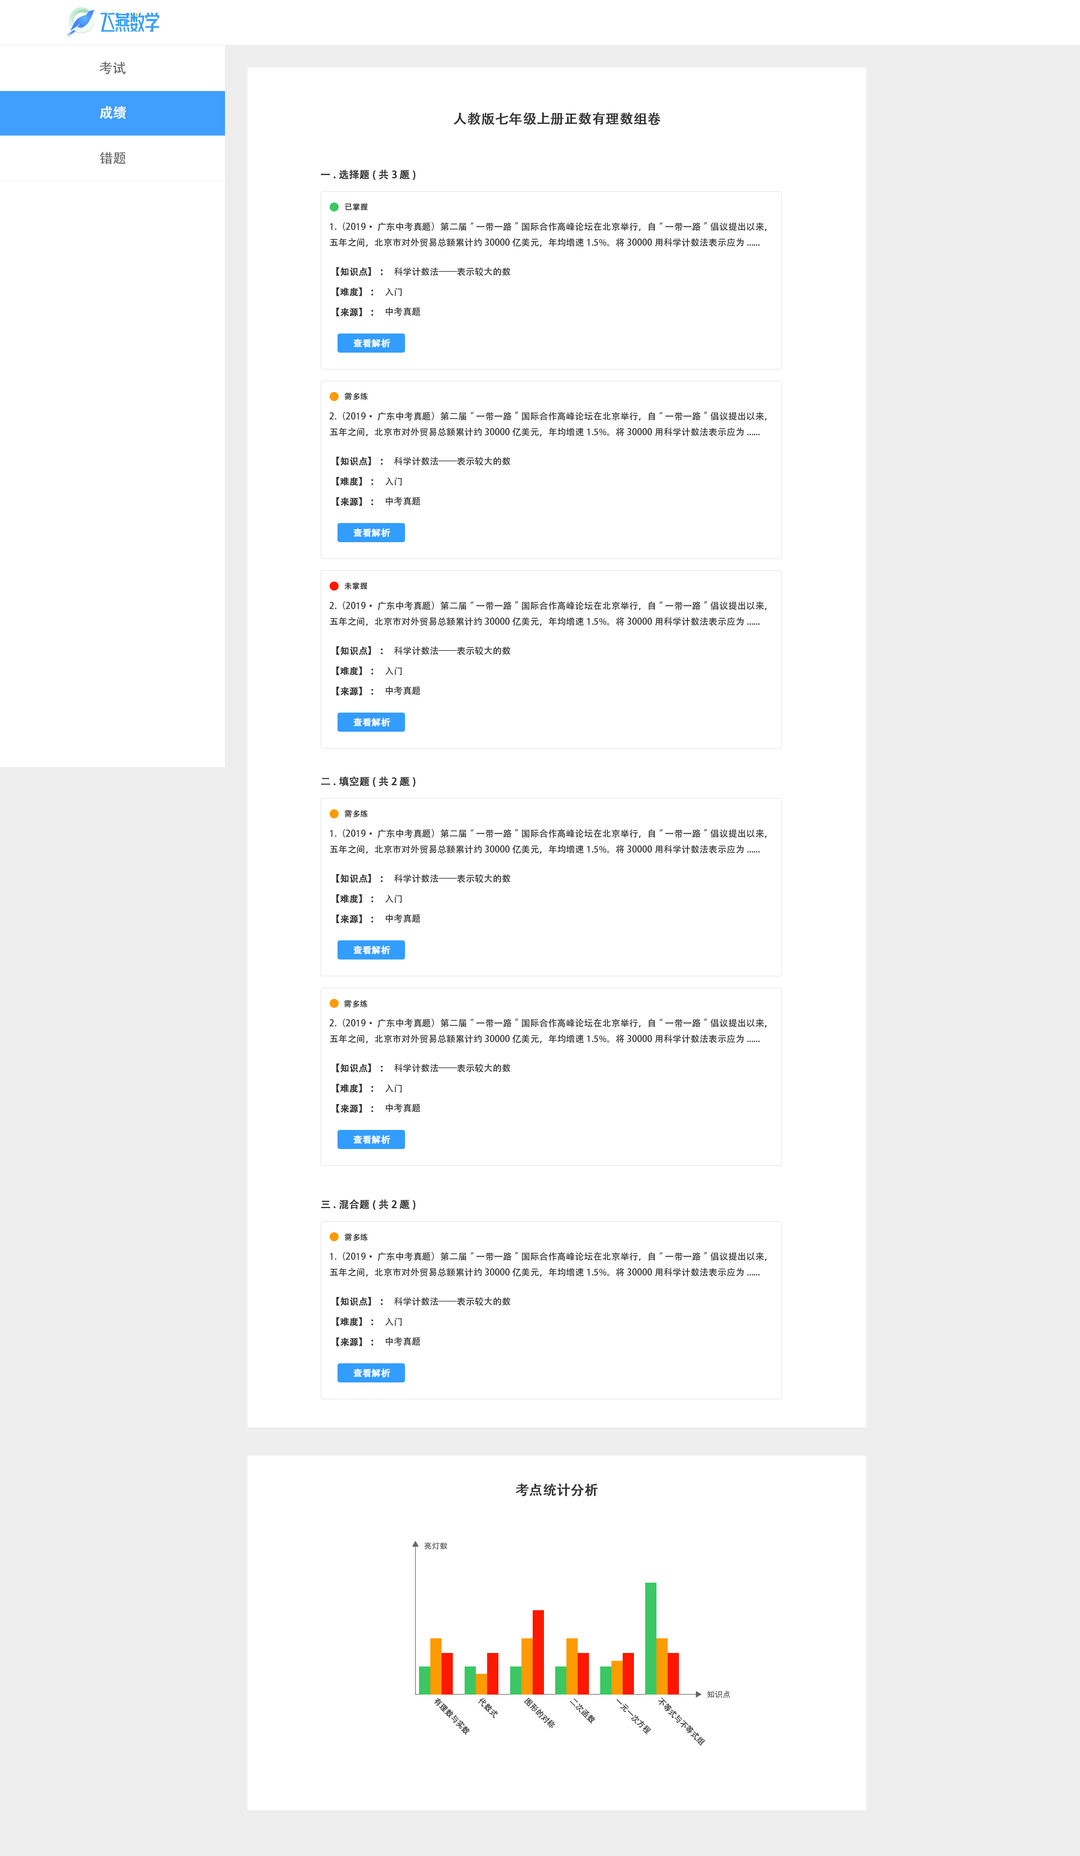
<style>
.page{position:relative;width:1080px;height:1856px;background:#ffffff}
.page>*{position:absolute;margin:0}
.t1{font:13.5px "AdobeHeitiStd-Regular";color:#666666}
.t2{font:13.5px "AdobeHeitiStd-Regular";color:#ffffff;font-weight:bold}
.t3{font:13.5px "AdobeHeitiStd-Regular";color:#333333;font-weight:bold}
.t4{font:10.1px "AdobeHeitiStd-Regular";color:#333333;font-weight:bold}
.t5{font:7.9px "AdobeHeitiStd-Regular";color:#333333}
.t6{font:9px "AdobeHeitiStd-Regular";color:#333333}
.t7{font:9px "AdobeHeitiStd-Regular";color:#333333;font-weight:bold}
.t8{font:9px "AdobeHeitiStd-Regular";color:#ffffff;font-weight:bold}
.t9{font:7.9px "AdobeHeitiStd-Regular";color:#666666}
</style>
<div class="page">
<p class="t1" style="left:99px;top:61px;width:27px;height:13px">考试</p>
<p class="t2" style="left:100px;top:106px;width:26px;height:13px">成绩</p>
<p class="t3" style="left:453px;top:112px;width:207px;height:13px">人教版七年级上册正数有理数组卷</p>
<p class="t1" style="left:100px;top:152px;width:26px;height:12px">错题</p>
<p class="t4" style="left:321px;top:169px;width:95px;height:12px">一.选择题(共3题)</p>
<p class="t5" style="left:345px;top:203px;width:23px;height:8px">已掌握</p>
<p class="t6" style="left:330px;top:222px;width:437px;height:25px">1.（2019·广东中考真题）第二届“一带一路”国际合作高峰论坛在北京举行，自“一带一路”倡议提出以来，五年之间，北京市对外贸易总额累计约30000亿美元，年均增速1.5%。将30000用科学计数法表示应为......</p>
<p class="t7" style="left:336px;top:267px;width:47px;height:9px">【知识点】：</p>
<p class="t6" style="left:394px;top:267px;width:117px;height:9px">科学计数法——表示较大的数</p>
<p class="t7" style="left:336px;top:287px;width:38px;height:9px">【难度】：</p>
<p class="t6" style="left:385px;top:288px;width:17px;height:8px">入门</p>
<p class="t7" style="left:336px;top:308px;width:38px;height:9px">【来源】：</p>
<p class="t6" style="left:385px;top:307px;width:35px;height:9px">中考真题</p>
<p class="t8" style="left:353px;top:339px;width:37px;height:9px">查看解析</p>
<p class="t5" style="left:345px;top:393px;width:23px;height:7px">需多练</p>
<p class="t6" style="left:329px;top:412px;width:438px;height:24px">2.（2019·广东中考真题）第二届“一带一路”国际合作高峰论坛在北京举行，自“一带一路”倡议提出以来，五年之间，北京市对外贸易总额累计约30000亿美元，年均增速1.5%。将30000用科学计数法表示应为......</p>
<p class="t7" style="left:336px;top:457px;width:47px;height:9px">【知识点】：</p>
<p class="t6" style="left:394px;top:457px;width:117px;height:9px">科学计数法——表示较大的数</p>
<p class="t7" style="left:336px;top:477px;width:38px;height:9px">【难度】：</p>
<p class="t6" style="left:385px;top:478px;width:17px;height:8px">入门</p>
<p class="t7" style="left:336px;top:497px;width:38px;height:9px">【来源】：</p>
<p class="t6" style="left:385px;top:497px;width:35px;height:9px">中考真题</p>
<p class="t8" style="left:353px;top:528px;width:37px;height:9px">查看解析</p>
<p class="t5" style="left:344px;top:582px;width:23px;height:8px">未掌握</p>
<p class="t6" style="left:329px;top:601px;width:438px;height:25px">2.（2019·广东中考真题）第二届“一带一路”国际合作高峰论坛在北京举行，自“一带一路”倡议提出以来，五年之间，北京市对外贸易总额累计约30000亿美元，年均增速1.5%。将30000用科学计数法表示应为......</p>
<p class="t7" style="left:336px;top:646px;width:47px;height:9px">【知识点】：</p>
<p class="t6" style="left:394px;top:646px;width:117px;height:9px">科学计数法——表示较大的数</p>
<p class="t7" style="left:336px;top:667px;width:38px;height:9px">【难度】：</p>
<p class="t6" style="left:385px;top:667px;width:17px;height:9px">入门</p>
<p class="t7" style="left:336px;top:687px;width:38px;height:9px">【来源】：</p>
<p class="t6" style="left:385px;top:686px;width:35px;height:9px">中考真题</p>
<p class="t8" style="left:353px;top:718px;width:37px;height:9px">查看解析</p>
<p class="t4" style="left:321px;top:776px;width:95px;height:12px">二.填空题(共2题)</p>
<p class="t5" style="left:345px;top:810px;width:23px;height:8px">需多练</p>
<p class="t6" style="left:330px;top:829px;width:437px;height:25px">1.（2019·广东中考真题）第二届“一带一路”国际合作高峰论坛在北京举行，自“一带一路”倡议提出以来，五年之间，北京市对外贸易总额累计约30000亿美元，年均增速1.5%。将30000用科学计数法表示应为......</p>
<p class="t7" style="left:336px;top:874px;width:47px;height:9px">【知识点】：</p>
<p class="t6" style="left:394px;top:874px;width:117px;height:9px">科学计数法——表示较大的数</p>
<p class="t7" style="left:336px;top:894px;width:38px;height:9px">【难度】：</p>
<p class="t6" style="left:385px;top:895px;width:17px;height:8px">入门</p>
<p class="t7" style="left:336px;top:915px;width:38px;height:9px">【来源】：</p>
<p class="t6" style="left:385px;top:914px;width:35px;height:9px">中考真题</p>
<p class="t8" style="left:353px;top:946px;width:37px;height:9px">查看解析</p>
<p class="t5" style="left:344px;top:1000px;width:24px;height:8px">需多练</p>
<p class="t6" style="left:329px;top:1019px;width:438px;height:24px">2.（2019·广东中考真题）第二届“一带一路”国际合作高峰论坛在北京举行，自“一带一路”倡议提出以来，五年之间，北京市对外贸易总额累计约30000亿美元，年均增速1.5%。将30000用科学计数法表示应为......</p>
<p class="t7" style="left:336px;top:1064px;width:47px;height:9px">【知识点】：</p>
<p class="t6" style="left:394px;top:1064px;width:117px;height:9px">科学计数法——表示较大的数</p>
<p class="t7" style="left:336px;top:1084px;width:38px;height:9px">【难度】：</p>
<p class="t6" style="left:385px;top:1084px;width:17px;height:9px">入门</p>
<p class="t7" style="left:336px;top:1104px;width:38px;height:9px">【来源】：</p>
<p class="t6" style="left:385px;top:1104px;width:35px;height:9px">中考真题</p>
<p class="t8" style="left:353px;top:1135px;width:37px;height:9px">查看解析</p>
<p class="t4" style="left:321px;top:1199px;width:95px;height:11px">三.混合题(共2题)</p>
<p class="t5" style="left:345px;top:1234px;width:23px;height:7px">需多练</p>
<p class="t6" style="left:330px;top:1252px;width:437px;height:25px">1.（2019·广东中考真题）第二届“一带一路”国际合作高峰论坛在北京举行，自“一带一路”倡议提出以来，五年之间，北京市对外贸易总额累计约30000亿美元，年均增速1.5%。将30000用科学计数法表示应为......</p>
<p class="t7" style="left:336px;top:1297px;width:47px;height:9px">【知识点】：</p>
<p class="t6" style="left:394px;top:1297px;width:117px;height:9px">科学计数法——表示较大的数</p>
<p class="t7" style="left:336px;top:1317px;width:38px;height:9px">【难度】：</p>
<p class="t6" style="left:385px;top:1318px;width:17px;height:8px">入门</p>
<p class="t7" style="left:336px;top:1338px;width:38px;height:9px">【来源】：</p>
<p class="t6" style="left:385px;top:1337px;width:35px;height:9px">中考真题</p>
<p class="t8" style="left:353px;top:1369px;width:37px;height:9px">查看解析</p>
<p class="t3" style="left:515px;top:1483px;width:83px;height:14px">考点统计分析</p>
<p class="t9" style="left:424px;top:1542px;width:24px;height:8px">亮灯数</p>
<p class="t5" style="left:434px;top:1698px;width:36px;height:37px;rotate:45deg">有理数与实数</p>
<p class="t5" style="left:524px;top:1698px;width:31px;height:31px;rotate:45deg">图形的对称</p>
<p class="t5" style="left:658px;top:1698px;width:47px;height:48px;rotate:45deg">不等式与不等式组</p>
<p class="t9" style="left:707px;top:1691px;width:23px;height:8px">知识点</p>
<p class="t5" style="left:478px;top:1698px;width:20px;height:20px;rotate:45deg">代数式</p>
<p class="t5" style="left:570px;top:1698px;width:25px;height:26px;rotate:45deg">二次函数</p>
<p class="t5" style="left:616px;top:1699px;width:35px;height:36px;rotate:45deg">一元一次方程</p>
</div>
